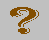
<style>
.page{position:relative;width:49px;height:40px;background:#c0c0c0}
.page>*{position:absolute;margin:0}
.t1{font:41.2px "Algerian";color:#834e00;scale:1.73 1}
</style>
<div class="page">
<p class="t1" style="left:10px;top:7px;width:29px;height:27px">?</p>
</div>
